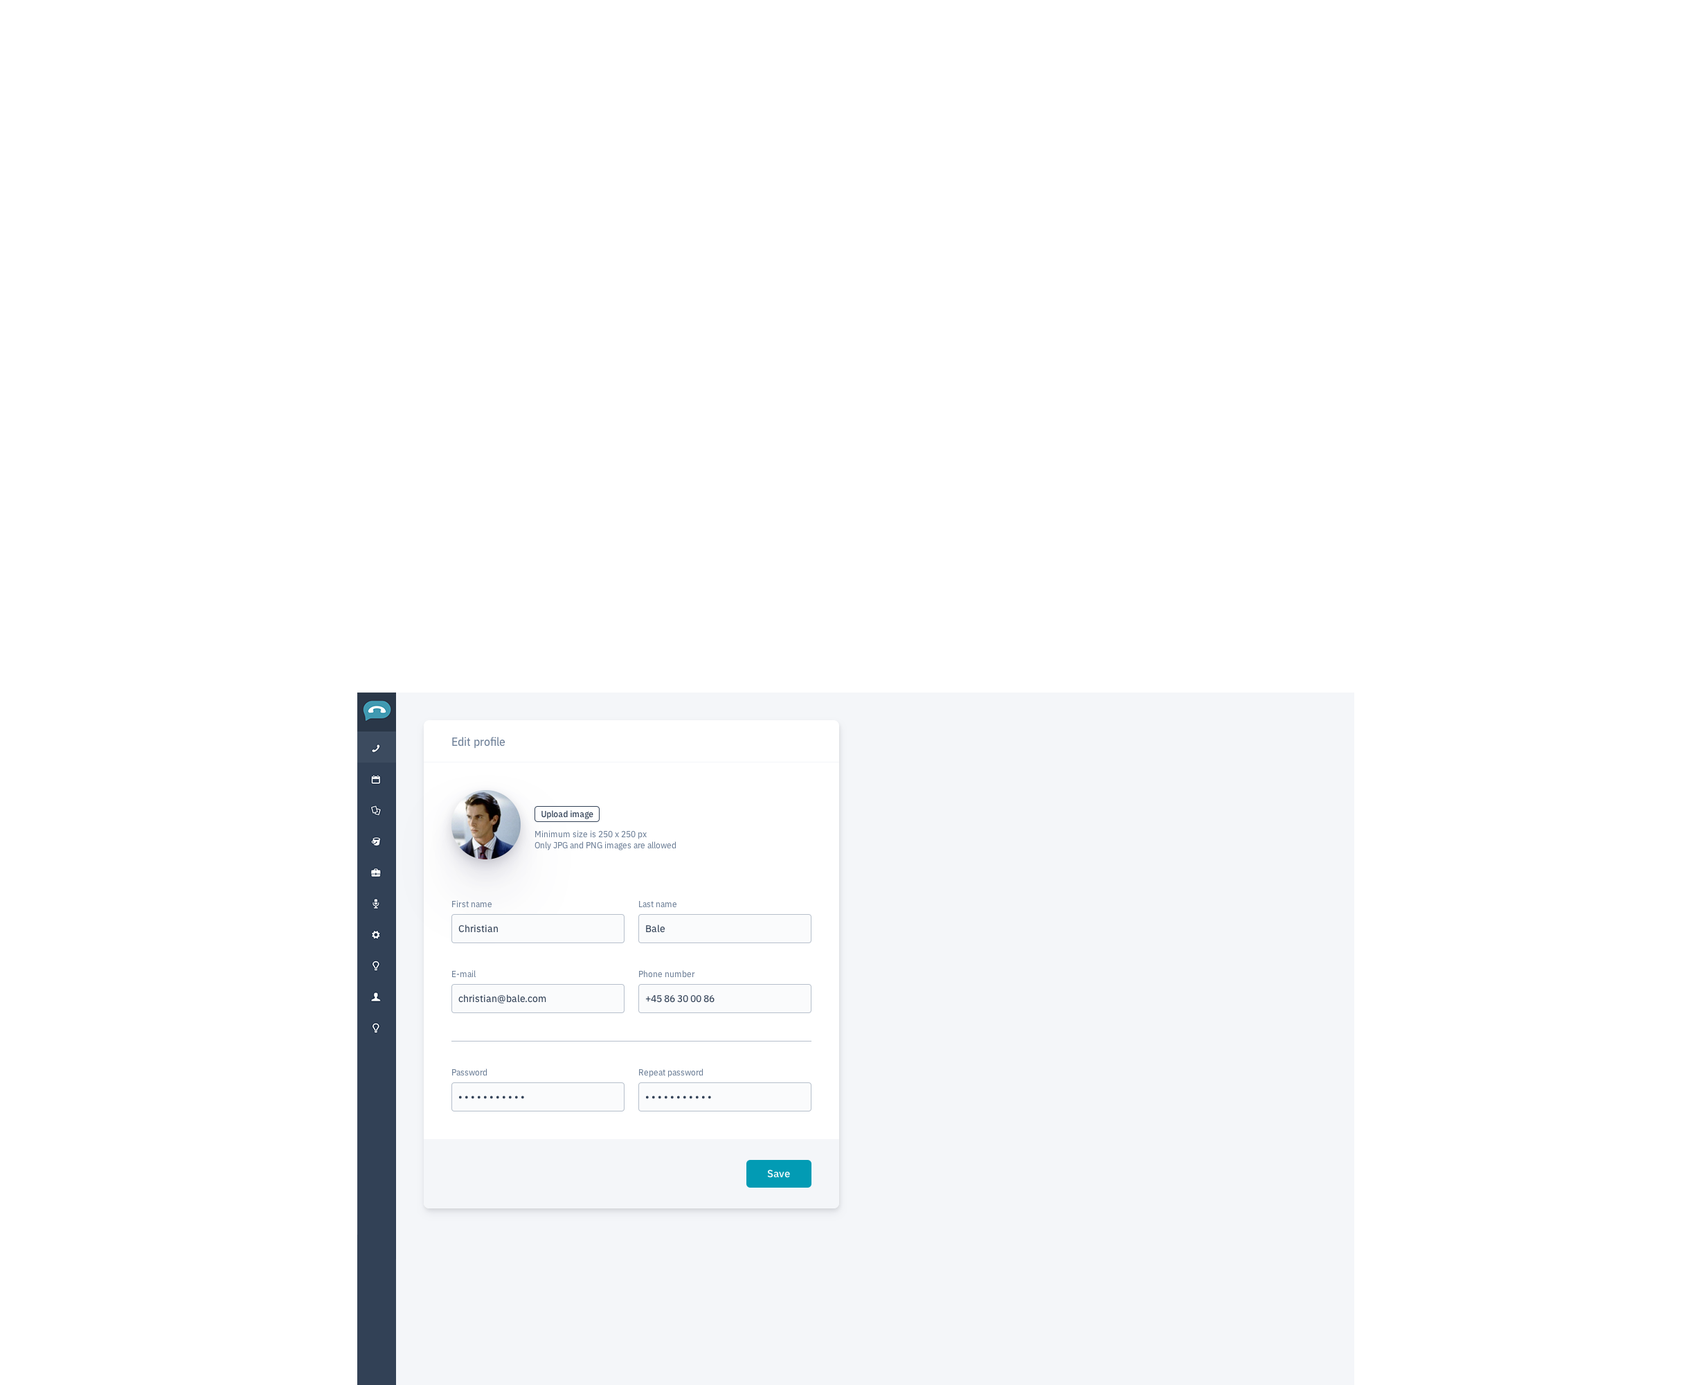
<style>
.page{position:relative;width:1706px;height:1385px;background:#ffffff}
.page>*{position:absolute;margin:0}
.t1{font:11.1px "IBMPlexSans-Text";color:#6d7f97}
.t2{font:8.3px "IBMPlexSans-Medium";color:#324156}
.t3{font:8.3px/11.1px "IBMPlexSans-Text";color:#6d7f97}
.t4{font:8.3px "IBMPlexSans-Text";color:#6d7f97}
.t5{font:9.7px "IBMPlexSans-Text";color:#324156}
.t6{font:10.4px "IBMPlexSans-Medium";color:#ffffff}
</style>
<div class="page">
<p class="t1" style="left:452px;top:737px;width:53px;height:11px">Edit profile</p>
<p class="t2" style="left:541px;top:810px;width:52px;height:9px">Upload image</p>
<p class="t3" style="left:534px;top:830px;width:142px;height:20px">Minimum size is 250 x 250 px<br>Only JPG and PNG images are allowed</p>
<p class="t4" style="left:452px;top:900px;width:40px;height:8px">First name</p>
<p class="t4" style="left:639px;top:901px;width:38px;height:7px">Last name</p>
<p class="t5" style="left:458px;top:924px;width:40px;height:9px">Christian</p>
<p class="t5" style="left:646px;top:924px;width:19px;height:9px">Bale</p>
<p class="t4" style="left:452px;top:970px;width:24px;height:8px">E-mail</p>
<p class="t4" style="left:639px;top:970px;width:56px;height:8px">Phone number</p>
<p class="t5" style="left:458px;top:994px;width:88px;height:9px">christian@bale.com</p>
<p class="t5" style="left:645px;top:995px;width:69px;height:7px">+45 86 30 00 86</p>
<p class="t4" style="left:452px;top:1068px;width:35px;height:8px">Password</p>
<p class="t4" style="left:639px;top:1068px;width:64px;height:9px">Repeat password</p>
<p class="t5" style="left:459px;top:1095px;width:65px;height:4px">• • • • • • • • • • •</p>
<p class="t5" style="left:646px;top:1095px;width:65px;height:4px">• • • • • • • • • • •</p>
<p class="t6" style="left:767px;top:1169px;width:23px;height:9px">Save</p>
</div>
